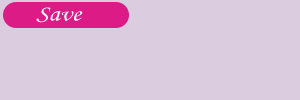
<style>
.page{position:relative;width:300px;height:100px;background:#dbccdf}
.page>*{position:absolute;margin:0}
.t1{font:22.5px "MonotypeCorsiva";color:#fdf9fe;scale:1.2 1}
</style>
<div class="page">
<p class="t1" style="left:36px;top:7px;width:47px;height:16px">Save</p>
</div>
